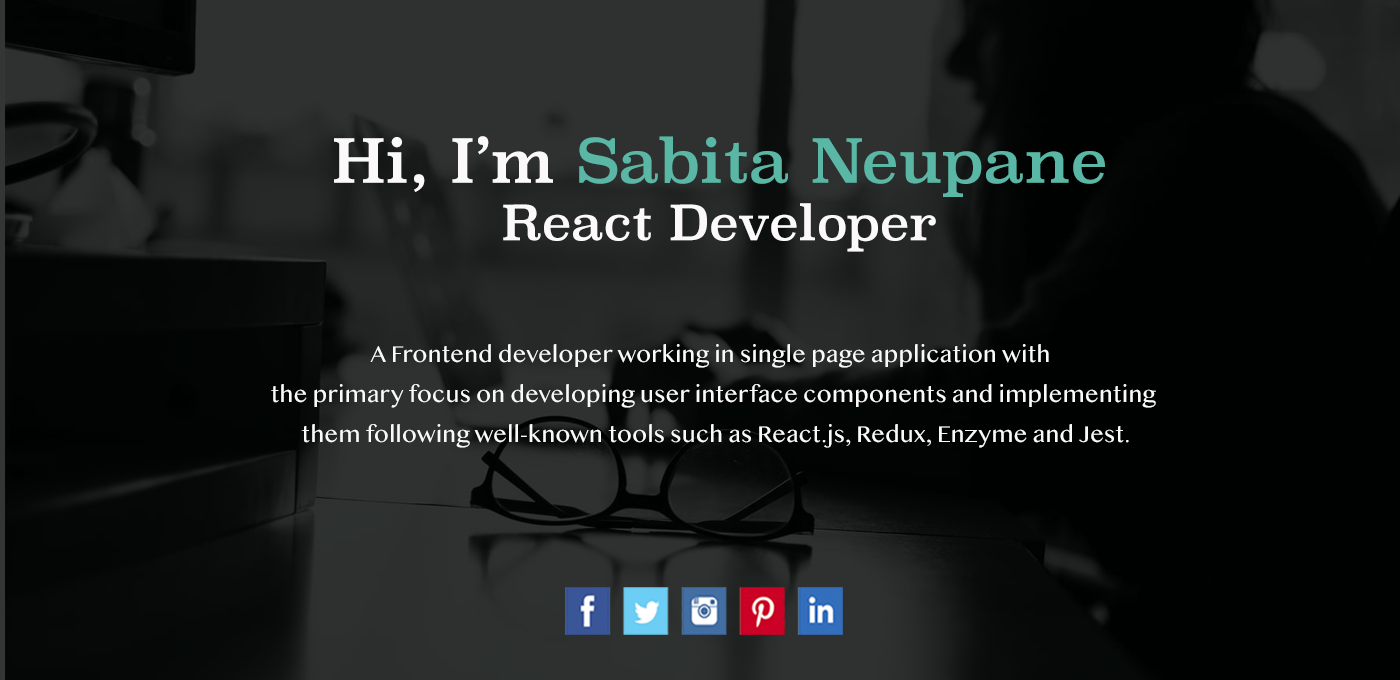
<style>
.page{position:relative;width:1400px;height:680px}
.page>*{position:absolute;margin:0}
.t1{font:48px "Superclarendon-Regular";color:#fbf9f9}
.t2{font:60px "Superclarendon-Regular";color:#fbf9f9}
.t3{font:60px "Superclarendon-Regular";color:#5ab7a5}
.t4{font:24px/40px "SinhalaMN";color:#f9fbfb}
</style>
<div class="page">
<p class="t1" style="left:334px;top:136px;width:771px;height:116px;text-align:center"><span class="t2">Hi, I’m </span><span class="t3">Sabita Neupane<br></span>React Developer</p>
<p class="t4" style="left:271px;top:344px;width:885px;height:104px;text-align:center">A Frontend developer working in single page application with <br>the primary focus on developing user interface components and implementing<br> them following well-known tools such as React.js, Redux, Enzyme and Jest.</p>
</div>
